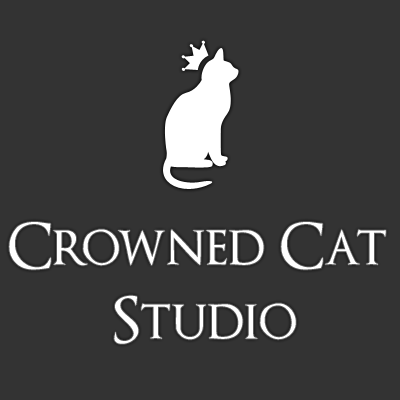
<style>
.page{position:relative;width:400px;height:400px;background:#333333}
.page>*{position:absolute;margin:0}
.t1{font:62px "OptimusPrinceps";color:#ffffff}
</style>
<div class="page">
<p class="t1" style="left:9px;top:222px;width:377px;height:122px;text-align:center">Crowned Cat <br>Studio</p>
</div>
